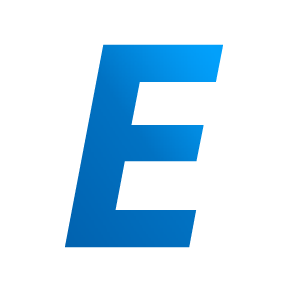
<style>
.page{position:relative;width:300px;height:300px;background:#ffffff}
.page>*{position:absolute;margin:0}
.t1{font:300px "MyriadPro-BoldIt";letter-spacing:-0.025em;color:#0170c0}
</style>
<div class="page">
<p class="t1" style="left:65px;top:44px;width:158px;height:204px">E</p>
</div>
